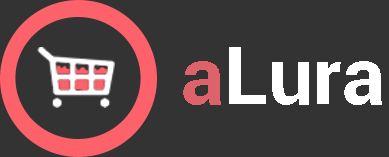
<style>
.page{position:relative;width:389px;height:157px;background:#333333}
.page>*{position:absolute;margin:0}
.t1{font:80px "Roboto-Bold";color:#ffffff}
.t2{font:80px "Roboto-Bold";color:#de626a}
</style>
<div class="page">
<p class="t1" style="left:183px;top:47px;width:199px;height:58px"><span class="t2">a</span>Lura</p>
</div>
